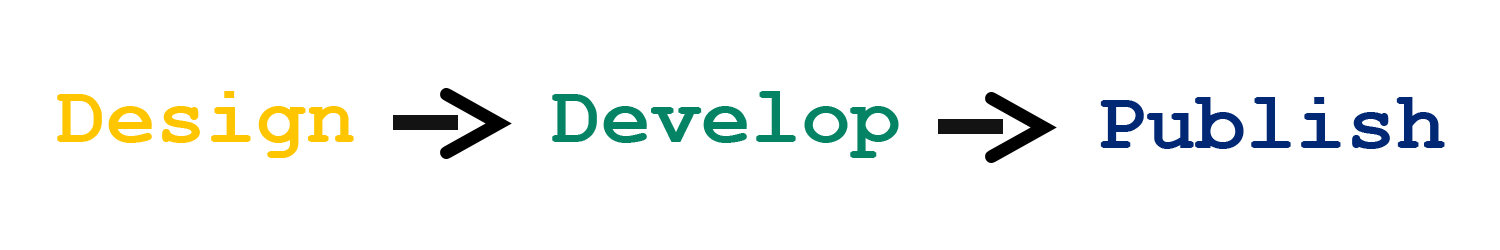
<style>
.page{position:relative;width:1500px;height:250px;background:#ffffff}
.page>*{position:absolute;margin:0}
.t1{font:125px "CourierNewPS-BoldMT";color:#000000}
.t2{font:83.3px "CourierNewPS-BoldMT";color:#ffc600}
.t3{font:83.3px "CourierNewPS-BoldMT";color:#058465}
.t4{font:83.3px "CourierNewPS-BoldMT";color:#002874}
</style>
<div class="page">
<p class="t1" style="left:440px;top:88px;width:72px;height:71px">&gt;</p>
<p class="t2" style="left:57px;top:91px;width:297px;height:67px">Design</p>
<p class="t3" style="left:552px;top:91px;width:347px;height:67px">Develop</p>
<p class="t1" style="left:985px;top:92px;width:72px;height:71px">&gt;</p>
<p class="t4" style="left:1100px;top:97px;width:345px;height:52px">Publish</p>
</div>
